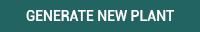
<style>
.page{position:relative;width:200px;height:32px;background:#216462}
.page>*{position:absolute;margin:0}
.t1{font:14px "Roboto-Medium";color:#ffffff}
</style>
<div class="page">
<p class="t1" style="left:26px;top:10px;width:149px;height:11px">GENERATE NEW PLANT</p>
</div>
